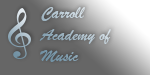
<style>
.page{position:relative;width:150px;height:75px;background:#666666}
.page>*{position:absolute;margin:0}
.t1{font:18px "BrushScriptMT"}
</style>
<div class="page">
<p class="t1" style="left:39px;top:7px;width:72px;height:55px">Carroll<br>Academy of <br>Music</p>
</div>
